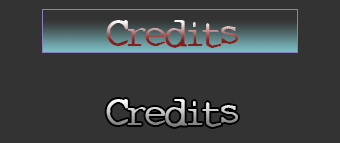
<style>
.page{position:relative;width:340px;height:143px;background:#333333}
.page>*{position:absolute;margin:0}
.t1{font:30px "Conspiracy"}
</style>
<div class="page">
<p class="t1" style="left:106px;top:20px;width:132px;height:28px">Credits</p>
<p class="t1" style="left:106px;top:99px;width:132px;height:28px">Credits</p>
</div>
